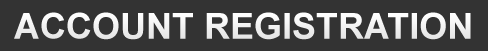
<style>
.page{position:relative;width:488px;height:51px;background:#333333}
.page>*{position:absolute;margin:0}
.t1{font:36px "Arial-BoldMT";color:#ffffff}
</style>
<div class="page">
<p class="t1" style="left:14px;top:12px;width:457px;height:28px">ACCOUNT REGISTRATION</p>
</div>
